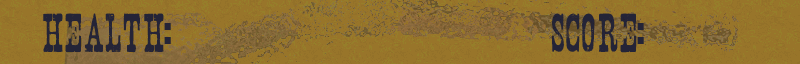
<style>
.page{position:relative;width:800px;height:64px;background:#98752a}
.page>*{position:absolute;margin:0}
.t1{font:48px "Nashville";color:#242437}
</style>
<div class="page">
<p class="t1" style="left:43px;top:13px;width:128px;height:40px">health:</p>
<p class="t1" style="left:552px;top:13px;width:92px;height:40px">score:</p>
</div>
